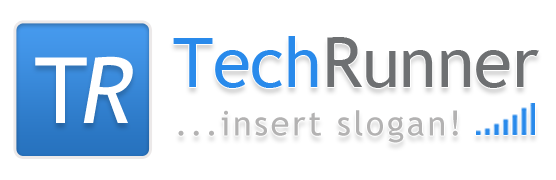
<style>
.page{position:relative;width:556px;height:180px;background:#ffffff}
.page>*{position:absolute;margin:0}
.t1{font:68.6px "TrebuchetMS";color:#298aeb}
.t2{font:68.6px "TrebuchetMS";color:#6e7072}
.t3{font:91.5px "TrebuchetMS";letter-spacing:0.075em;color:#ffffff}
.t4{font:91.5px "TrebuchetMS-Italic";letter-spacing:0.075em;color:#ffffff}
.t5{font:34.3px "TrebuchetMS";letter-spacing:0.075em;color:#b3b2b2}
</style>
<div class="page">
<p class="t1" style="left:173px;top:36px;width:145px;height:52px">Tech</p>
<p class="t2" style="left:327px;top:37px;width:212px;height:51px">Runner</p>
<p class="t3" style="left:35px;top:57px;width:52px;height:66px">T</p>
<p class="t4" style="left:83px;top:56px;width:50px;height:67px">R</p>
<p class="t5" style="left:178px;top:110px;width:280px;height:33px">...insert slogan!</p>
</div>
